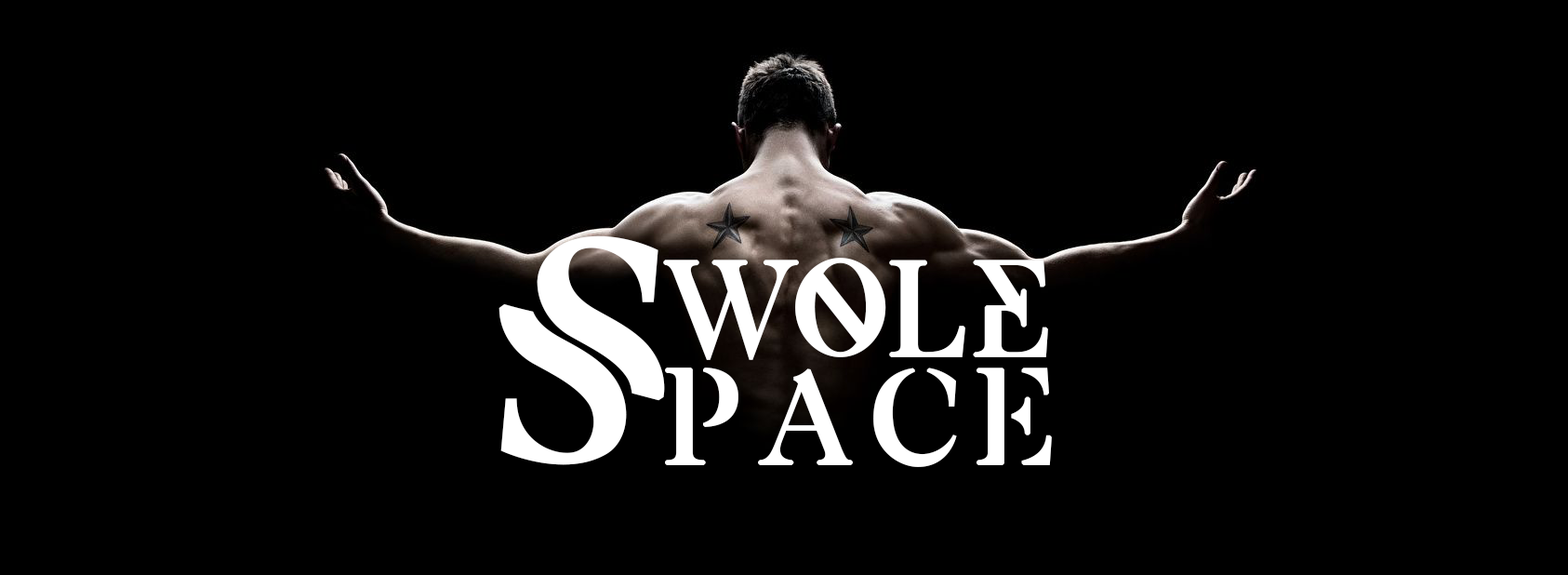
<style>
.page{position:relative;width:1568px;height:575px;background:#000000}
.page>*{position:absolute;margin:0}
.t1{font:290.6px "ExodusDemo-St";color:#ffffff;font-weight:bold}
.t2{font:232.5px "ExodusDemo-St";letter-spacing:0.005em;color:#ffffff;font-weight:bold}
.t3{font:127.9px "ExodusDemo-St";letter-spacing:0.005em;color:#ffffff;font-weight:bold}
.t4{font:127.9px "ExodusDemo-Stencil";letter-spacing:0.1em;color:#ffffff;font-weight:bold}
.t5{font:127.9px "ExodusDemo-Regular";letter-spacing:0.1em;color:#ffffff;font-weight:bold}
</style>
<div class="page">
<p class="t1" style="left:498px;top:235px;width:167px;height:230px"><span class="t2"><br></span>S</p>
<p class="t3" style="left:663px;top:258px;width:385px;height:102px">wole</p>
<p class="t4" style="left:665px;top:367px;width:387px;height:100px">p<span class="t5">a</span>ce</p>
</div>
